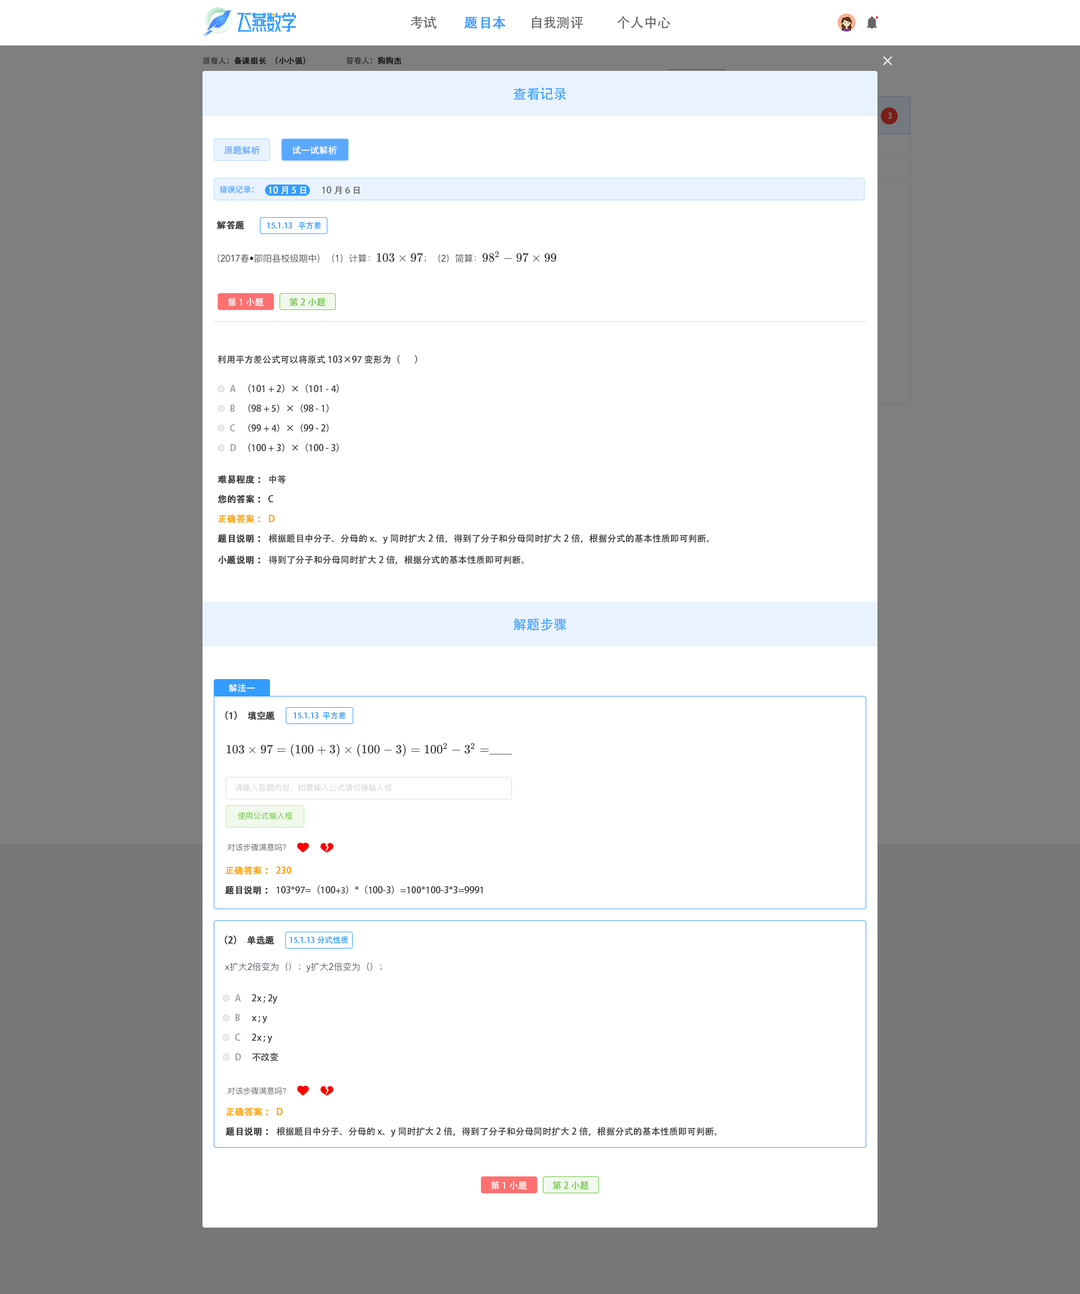
<style>
.page{position:relative;width:1080px;height:1294px;background:#ffffff}
.page>*{position:absolute;margin:0}
.t1{font:13.5px "AdobeHeitiStd-Regular";color:#666666}
.t2{font:13.5px "AdobeHeitiStd-Regular";color:#409eff;font-weight:bold}
.t3{font:7.9px "AdobeHeitiStd-Regular";color:#191919;font-weight:bold}
.t4{font:7.9px "AdobeHeitiStd-Regular";color:#191919}
.t5{font:7.9px "AdobeHeitiStd-Regular"}
.t6{font:7.9px "AdobeHeitiStd-Regular";font-weight:bold}
.t7{font:13.5px "AdobeHeitiStd-Regular";color:#339dff}
.t8{font:7.9px "AdobeHeitiStd-Regular";color:#7f7f7f}
.t9{font:9px "AdobeHeitiStd-Regular";color:#5ba8ff}
.t10{font:9px "AdobeHeitiStd-Regular";color:#ffffff}
.t11{font:7.9px "AdobeHeitiStd-Regular";color:#5ba8ff}
.t12{font:9px "AdobeHeitiStd-Regular";color:#666666}
.t13{font:9px "AdobeHeitiStd-Regular";color:#333333;font-weight:bold}
.t14{font:7.9px "AdobeHeitiStd-Regular";color:#339dff}
.t15{font:9px "AdobeHeitiStd-Regular";color:#6ec544}
.t16{font:9px "AdobeHeitiStd-Regular";color:#333333}
.t17{font:9px "AdobeHeitiStd-Regular";color:#999999}
.t18{font:9px "AdobeHeitiStd-Regular";color:#fea300;font-weight:bold}
.t19{font:9px "MyriadPro-Regular";color:#333333}
</style>
<div class="page">
<p class="t1" style="left:410px;top:16px;width:27px;height:13px">考试</p>
<p class="t2" style="left:464px;top:16px;width:42px;height:13px">题目本</p>
<p class="t1" style="left:532px;top:16px;width:51px;height:13px">自我测评</p>
<p class="t1" style="left:617px;top:16px;width:53px;height:13px">个人中心</p>
<p class="t3" style="left:202px;top:57px;width:103px;height:8px"><span class="t4">派卷人：</span>备课组长（小小强）</p>
<p class="t5" style="left:346px;top:56px;width:56px;height:9px">答卷人：<span class="t6">狗狗杰</span></p>
<p class="t7" style="left:514px;top:87px;width:52px;height:13px">查看记录</p>
<p class="t8" style="left:888px;top:112px;width:4px;height:7px">3</p>
<p class="t9" style="left:224px;top:146px;width:36px;height:9px">原题解析</p>
<p class="t10" style="left:292px;top:146px;width:45px;height:9px">试一试解析</p>
<p class="t11" style="left:219px;top:186px;width:35px;height:8px">错误记录：</p>
<p class="t10" style="left:268px;top:186px;width:39px;height:9px">10月5日</p>
<p class="t12" style="left:322px;top:186px;width:38px;height:9px">10月6日</p>
<p class="t13" style="left:217px;top:220px;width:28px;height:10px">解答题</p>
<p class="t14" style="left:267px;top:222px;width:54px;height:8px">15.1.13   平方差</p>
<p class="t10" style="left:228px;top:298px;width:36px;height:9px">第1小题</p>
<p class="t15" style="left:289px;top:298px;width:36px;height:9px">第2小题</p>
<p class="t16" style="left:218px;top:355px;width:199px;height:9px">利用平方差公式可以将原式103×97变形为（       ）</p>
<p class="t17" style="left:230px;top:385px;width:6px;height:7px">A</p>
<p class="t16" style="left:248px;top:384px;width:91px;height:9px">（101 + 2）×（101 - 4）</p>
<p class="t17" style="left:230px;top:404px;width:5px;height:8px">B</p>
<p class="t16" style="left:248px;top:404px;width:80px;height:9px">（98 + 5）×（98 - 1）</p>
<p class="t17" style="left:230px;top:424px;width:5px;height:7px">C</p>
<p class="t16" style="left:248px;top:424px;width:80px;height:9px">（99 + 4）×（99 - 2）</p>
<p class="t17" style="left:230px;top:444px;width:6px;height:7px">D</p>
<p class="t16" style="left:248px;top:443px;width:91px;height:9px">（100 + 3）×（100 - 3）</p>
<p class="t13" style="left:218px;top:475px;width:68px;height:9px">难易程度：<span class="t16"> 中等</span></p>
<p class="t13" style="left:218px;top:494px;width:55px;height:9px">您的答案：<span class="t16"> C</span></p>
<p class="t18" style="left:218px;top:514px;width:57px;height:9px">正确答案： D</p>
<p class="t16" style="left:218px;top:534px;width:491px;height:10px"><span class="t13">题目说明： </span>根据题目中分子、分母的x、y同时扩大2倍，得到了分子和分母同时扩大2倍，根据分式的基本性质即可判断。</p>
<p class="t16" style="left:218px;top:555px;width:306px;height:9px"><span class="t13">小题说明：</span>得到了分子和分母同时扩大2倍，根据分式的基本性质即可判断。</p>
<p class="t7" style="left:514px;top:618px;width:52px;height:13px">解题步骤</p>
<p class="t10" style="left:228px;top:683px;width:27px;height:9px">解法一</p>
<p class="t13" style="left:225px;top:711px;width:50px;height:9px">（1）填空题</p>
<p class="t14" style="left:294px;top:712px;width:52px;height:7px">15.1.13  平方差</p>
<p class="t18" style="left:226px;top:866px;width:65px;height:9px">正确答案： 230</p>
<p class="t16" style="left:225px;top:885px;width:258px;height:9px"><span class="t13">题目说明：</span>103*97=（100<span class="t19">+3</span>）*（100-3）=100*100-3*3=9991</p>
<p class="t13" style="left:224px;top:935px;width:50px;height:9px">（2）单选题</p>
<p class="t14" style="left:290px;top:936px;width:58px;height:8px">15.1.13分式性质</p>
<p class="t17" style="left:235px;top:994px;width:6px;height:7px">A</p>
<p class="t16" style="left:251px;top:994px;width:26px;height:10px">2x ; 2y</p>
<p class="t17" style="left:235px;top:1014px;width:5px;height:7px">B</p>
<p class="t16" style="left:252px;top:1016px;width:15px;height:7px">x ; y</p>
<p class="t17" style="left:235px;top:1033px;width:5px;height:8px">C</p>
<p class="t16" style="left:251px;top:1033px;width:21px;height:10px">2x ; y</p>
<p class="t17" style="left:235px;top:1053px;width:6px;height:7px">D</p>
<p class="t16" style="left:252px;top:1052px;width:26px;height:9px">不改变</p>
<p class="t18" style="left:226px;top:1107px;width:57px;height:9px">正确答案： D</p>
<p class="t16" style="left:226px;top:1127px;width:491px;height:10px"><span class="t13">题目说明： </span>根据题目中分子、分母的x、y同时扩大2倍，得到了分子和分母同时扩大2倍，根据分式的基本性质即可判断。</p>
<p class="t10" style="left:491px;top:1181px;width:36px;height:9px">第1小题</p>
<p class="t15" style="left:552px;top:1181px;width:36px;height:9px">第2小题</p>
</div>
